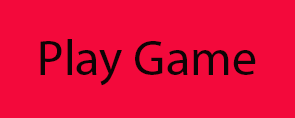
<style>
.page{position:relative;width:295px;height:118px;background:#f3093b}
.page>*{position:absolute;margin:0}
.t1{font:50px "MyriadPro-Regular";color:#0d0406}
</style>
<div class="page">
<p class="t1" style="left:40px;top:39px;width:216px;height:47px">Play Game</p>
</div>
